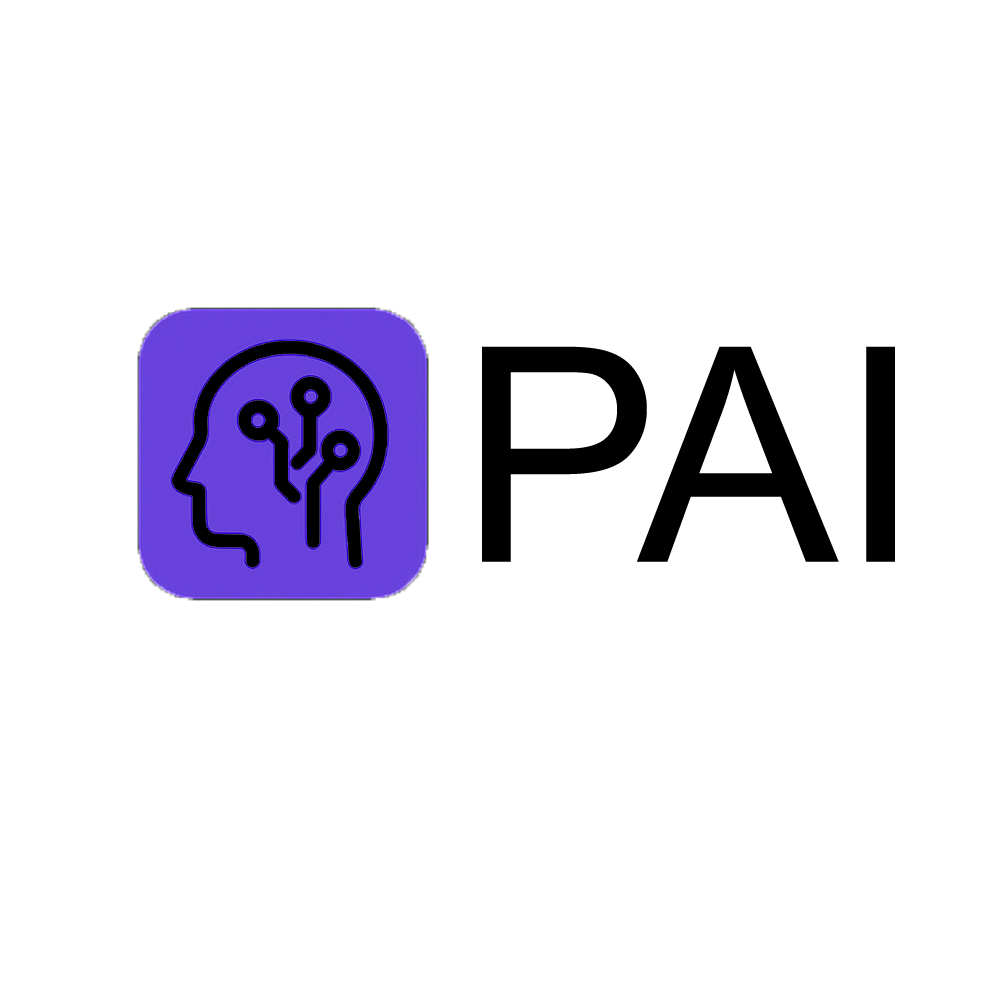
<style>
.page{position:relative;width:1000px;height:1000px;background:#ffffff}
.page>*{position:absolute;margin:0}
.t1{font:300.1px "ArialMT";color:#000000}
</style>
<div class="page">
<p class="t1" style="left:482px;top:346px;width:413px;height:216px">PAI</p>
</div>
